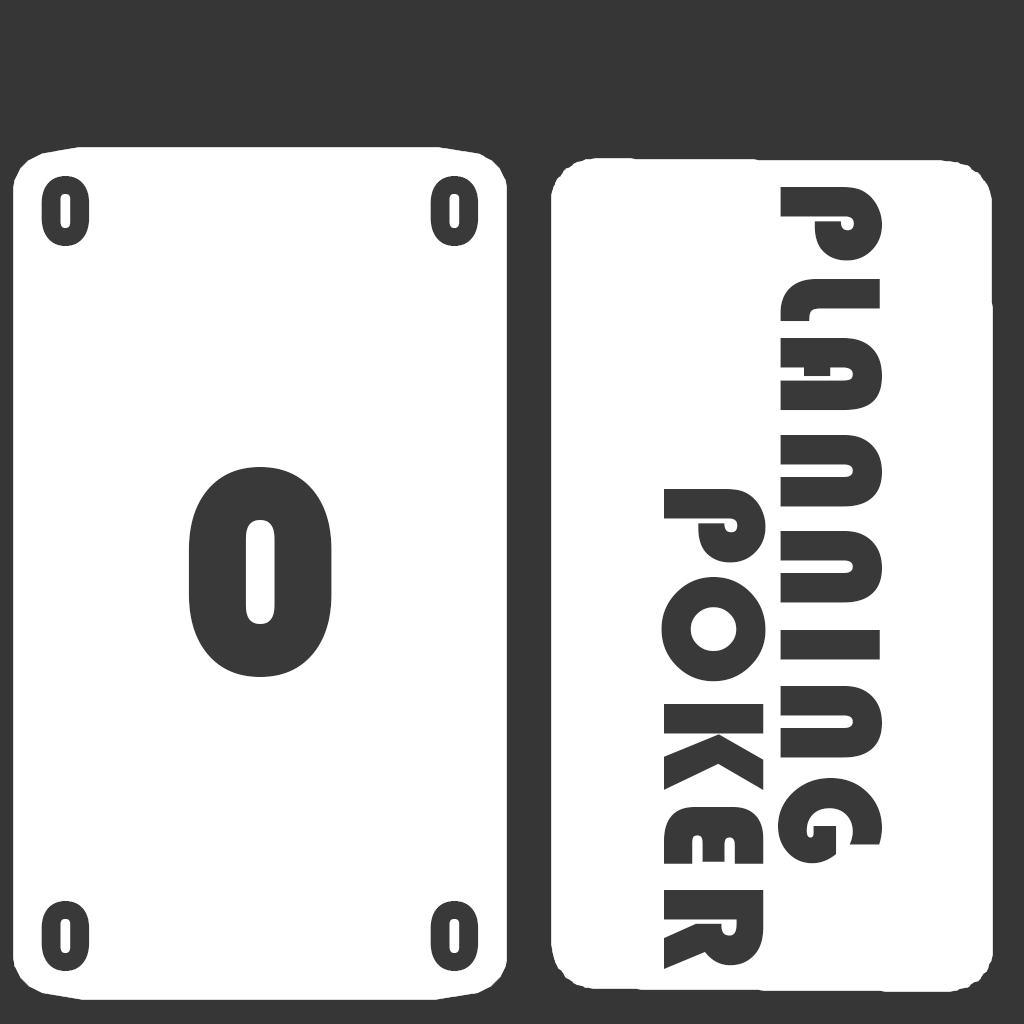
<style>
.page{position:relative;width:1024px;height:1024px;background:#ffffff}
.page>*{position:absolute;margin:0}
.t1{font:100px "Bauhaus93";letter-spacing:0.06em;color:#3a3939}
.t2{font:148.7px "Bauhaus93";letter-spacing:0.06em;color:#3a3939}
.t3{font:300px "Bauhaus93";letter-spacing:0.06em;color:#3a3939}
</style>
<div class="page">
<p class="t1" style="left:41px;top:176px;width:49px;height:70px">0</p>
<p class="t1" style="left:430px;top:176px;width:49px;height:70px">0</p>
<p class="t2" style="left:778px;top:187px;width:104px;height:677px;rotate:90deg">PLANNING</p>
<p class="t3" style="left:188px;top:467px;width:144px;height:210px">0</p>
<p class="t2" style="left:661px;top:489px;width:105px;height:480px;rotate:90deg">POKER</p>
<p class="t1" style="left:41px;top:901px;width:49px;height:70px">0</p>
<p class="t1" style="left:430px;top:901px;width:49px;height:70px">0</p>
</div>
